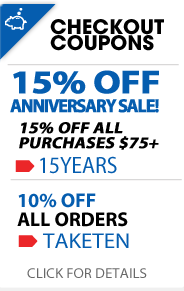
<style>
.page{position:relative;width:184px;height:291px;background:#ffffff}
.page>*{position:absolute;margin:0}
.t1{font:20px "AvantGarde-Bold";color:#000000;text-transform:uppercase}
.t2{font:19px/19px "MyriadPro-Bold";letter-spacing:-0.08em;color:#055daf;text-transform:uppercase;font-weight:bold;scale:0.94 1}
.t3{font:32.9px/19px "MyriadPro-Bold";letter-spacing:-0.025em;color:#055daf;text-transform:uppercase;font-weight:bold;scale:1.15 1}
.t4{font:16px/15px "MyriadPro-Bold";color:#000000;text-transform:uppercase;font-weight:bold;font-style:italic;scale:1.06 1}
.t5{font:23.6px "MyriadPro-Regular";color:#055daf;text-transform:uppercase;scale:0.91 1}
.t6{font:20px/19px "MyriadPro-Bold";color:#000000;text-transform:uppercase}
.t7{font:20px/19px "MyriadPro-Bold";color:#055daf;text-transform:uppercase}
.t8{font:21.6px "MyriadPro-Regular";color:#055daf;text-transform:uppercase;scale:1.06 1}
.t9{font:14px "MyriadPro-Regular";color:#696969;text-transform:uppercase;scale:1.06 1}
</style>
<div class="page">
<p class="t1" style="left:50px;top:19px;width:114px;height:16px">Checkout</p>
<p class="t1" style="left:50px;top:35px;width:104px;height:16px">cOUPONS</p>
<p class="t2" style="left:10px;top:70px;width:149px;height:43px"><span class="t3">15% Off <br></span>Anniversary Sale!</p>
<p class="t4" style="left:19px;top:122px;width:140px;height:28px">15% off all <br>purchases $75+</p>
<p class="t5" style="left:40px;top:156px;width:77px;height:18px">15years</p>
<p class="t6" style="left:17px;top:193px;width:111px;height:34px"><span class="t7">10% OFF <br></span>ALL ORDERS</p>
<p class="t8" style="left:43px;top:233px;width:86px;height:15px">TAKETEN</p>
<p class="t9" style="left:27px;top:268px;width:120px;height:10px">click for details</p>
</div>
